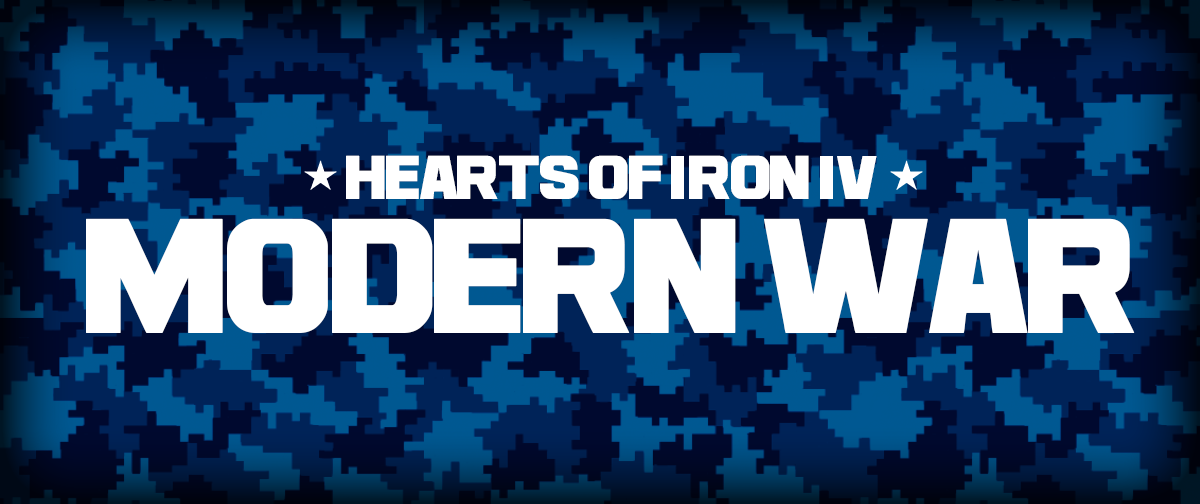
<style>
.page{position:relative;width:1200px;height:504px}
.page>*{position:absolute;margin:0}
.t1{font:48.1px "Ash";letter-spacing:-0.06em;color:#ffffff;scale:0.8 1}
.t2{font:127px "Ash";letter-spacing:-0.06em;color:#ffffff;scale:0.8 1}
</style>
<div class="page">
<p class="t1" style="left:346px;top:155px;width:531px;height:44px">hearts of iron iv</p>
<p class="t2" style="left:86px;top:218px;width:1049px;height:115px">modern war</p>
</div>
